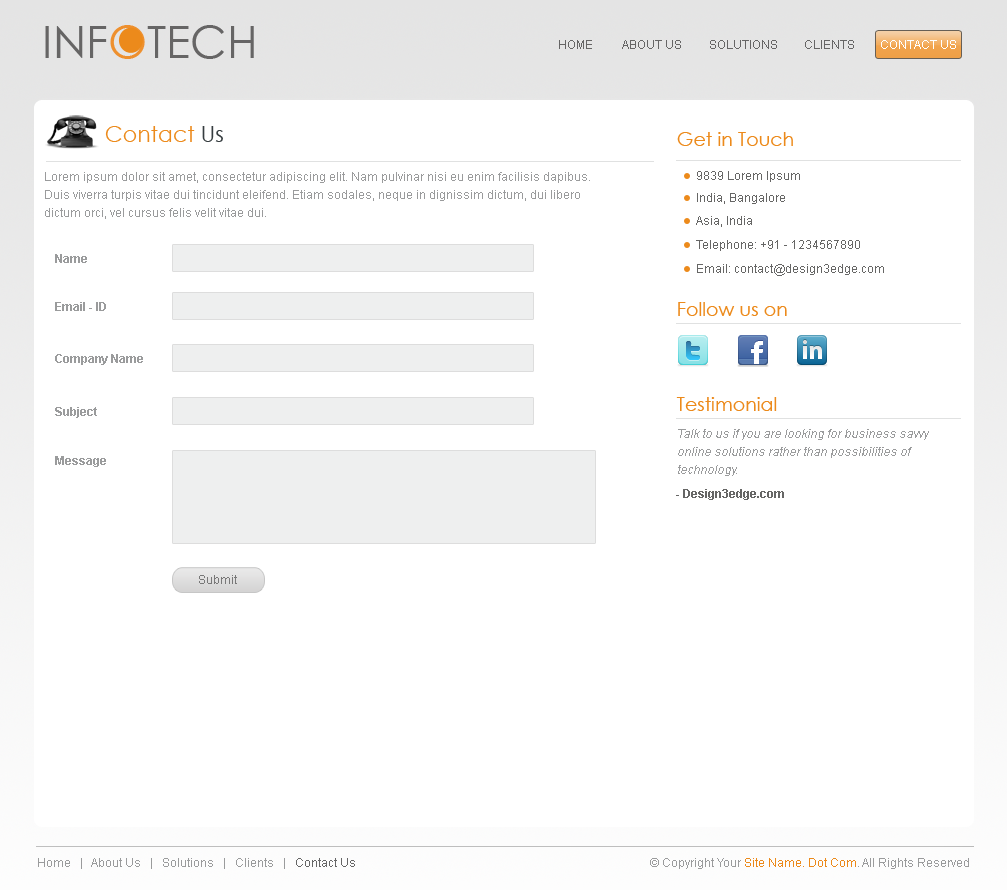
<style>
.page{position:relative;width:1007px;height:890px;background:#ffffff}
.page>*{position:absolute;margin:0}
.t1{font:45.1px "CenturyGothic";color:#666565}
.t2{font:45.1px "CenturyGothic";color:#ee902e}
.t3{font:12px "ArialMT";color:#666565}
.t4{font:12px "ArialMT";color:#ffffff}
.t5{font:22px "CenturyGothic";color:#ec8a1b}
.t6{font:22px "CenturyGothic";color:#363d40}
.t7{font:19px "CenturyGothic";color:#ec8a1b}
.t8{font:12px/18px "ArialMT";color:#9a9b9c}
.t9{font:12px "ArialMT";color:#666665}
.t10{font:12px "Arial-BoldMT";color:#9a9b9c}
.t11{font:12px/18px "ArialMT";color:#9a9b9c;font-style:italic}
.t12{font:12px "Arial-BoldMT";color:#666665}
.t13{font:12px "ArialMT";color:#787878}
.t14{font:12px "ArialMT";color:#9a9b9c}
.t15{font:12px "ArialMT";color:#666666}
.t16{font:12px "ArialMT";color:#ec8a1b}
</style>
<div class="page">
<p class="t1" style="left:45px;top:25px;width:209px;height:34px">INF<span class="t2">O</span>TECH</p>
<p class="t3" style="left:559px;top:40px;width:33px;height:9px">HOME</p>
<p class="t3" style="left:622px;top:40px;width:59px;height:9px">ABOUT US</p>
<p class="t3" style="left:710px;top:40px;width:67px;height:9px">SOLUTIONS</p>
<p class="t3" style="left:805px;top:40px;width:49px;height:9px">CLIENTS</p>
<p class="t4" style="left:881px;top:40px;width:75px;height:9px">CONTACT US</p>
<p class="t5" style="left:105px;top:126px;width:118px;height:16px">Contact <span class="t6">Us</span></p>
<p class="t7" style="left:677px;top:132px;width:116px;height:14px">Get in Touch</p>
<p class="t8" style="left:45px;top:172px;width:545px;height:47px">Lorem ipsum dolor sit amet, consectetur adipiscing elit. Nam pulvinar nisi eu enim facilisis dapibus. <br>Duis viverra turpis vitae dui tincidunt eleifend. Etiam sodales, neque in dignissim dictum, dui libero <br>dictum orci, vel cursus felis velit vitae dui.</p>
<p class="t9" style="left:697px;top:171px;width:103px;height:11px">9839 Lorem Ipsum</p>
<p class="t9" style="left:697px;top:193px;width:88px;height:11px">India, Bangalore</p>
<p class="t9" style="left:696px;top:216px;width:56px;height:11px">Asia, India</p>
<p class="t9" style="left:696px;top:240px;width:164px;height:11px">Telephone: +91 - 1234567890</p>
<p class="t10" style="left:55px;top:254px;width:32px;height:9px">Name</p>
<p class="t9" style="left:697px;top:264px;width:187px;height:12px">Email: contact@design3edge.com</p>
<p class="t10" style="left:55px;top:302px;width:51px;height:9px">Email - ID</p>
<p class="t7" style="left:678px;top:302px;width:109px;height:14px">Follow us on</p>
<p class="t10" style="left:55px;top:354px;width:88px;height:11px">Company Name</p>
<p class="t7" style="left:676px;top:397px;width:101px;height:14px">Testimonial</p>
<p class="t10" style="left:55px;top:407px;width:42px;height:11px">Subject</p>
<p class="t11" style="left:678px;top:429px;width:251px;height:47px">Talk to us if you are looking for business savvy <br>online solutions rather than possibilities of <br>technology.</p>
<p class="t10" style="left:55px;top:456px;width:51px;height:11px">Message</p>
<p class="t12" style="left:676px;top:489px;width:108px;height:11px">- Design3edge.com</p>
<p class="t13" style="left:199px;top:575px;width:38px;height:9px">Submit</p>
<p class="t14" style="left:38px;top:858px;width:317px;height:11px">Home   |   About Us   |   Solutions   |   Clients   |   <span class="t15">Contact Us</span></p>
<p class="t14" style="left:650px;top:858px;width:319px;height:11px">© Copyright Your <span class="t16">Site Name. Dot Com</span>. All Rights Reserved</p>
</div>
